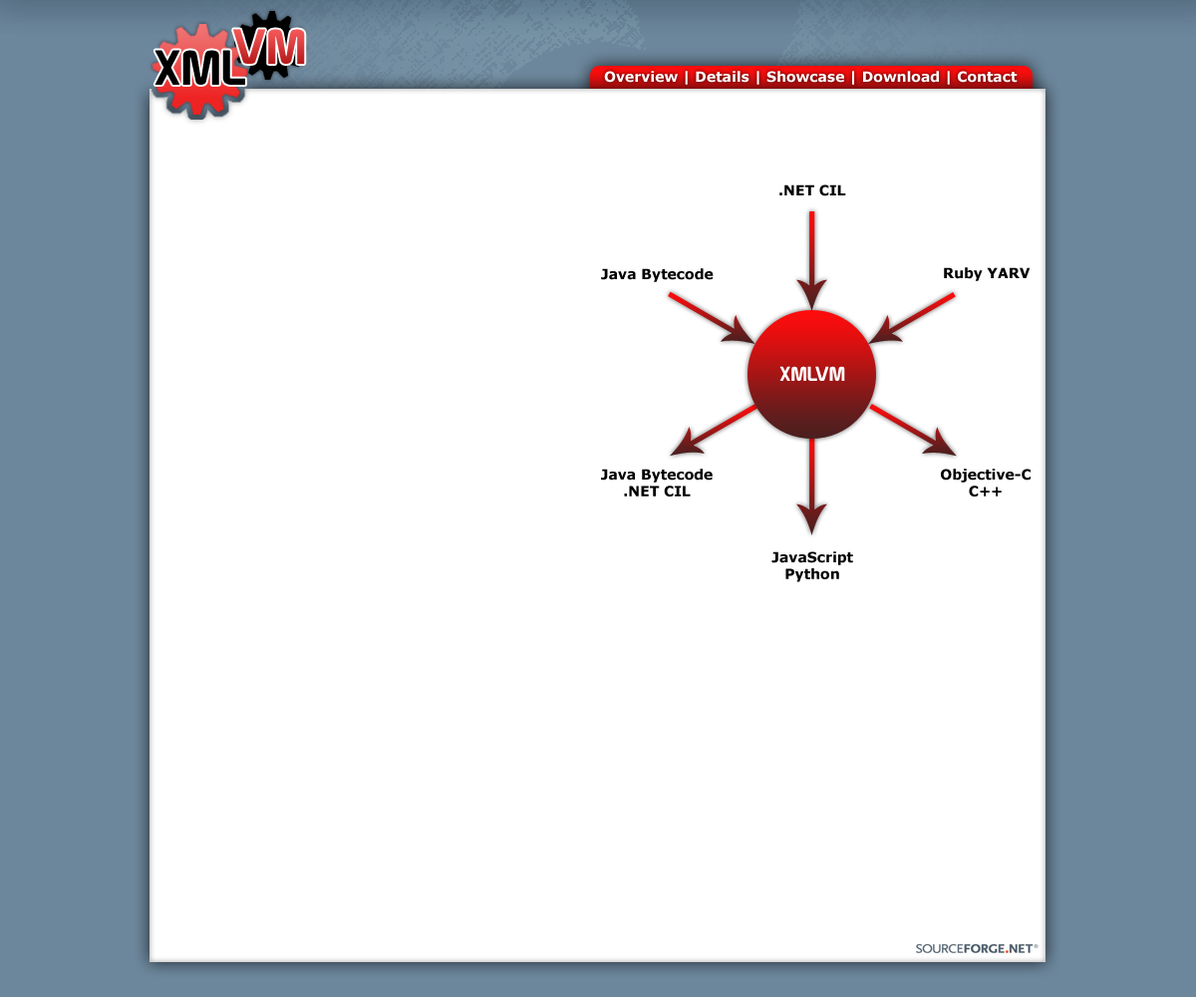
<style>
.page{position:relative;width:1196px;height:997px;background:#ffffff}
.page>*{position:absolute;margin:0}
.t1{font:47.8px "Prototype"}
.t2{font:47.8px "Prototype";color:#000000}
.t3{font:14px "Verdana-Bold";color:#ffffff}
.t4{font:14px "Verdana-Bold";color:#000000}
.t5{font:19.7px "Prototype";color:#ffffff}
</style>
<div class="page">
<p class="t1" style="left:233px;top:29px;width:72px;height:35px">VM</p>
<p class="t1" style="left:233px;top:29px;width:72px;height:35px">VM</p>
<p class="t2" style="left:155px;top:50px;width:90px;height:35px">XML</p>
<p class="t3" style="left:604px;top:71px;width:414px;height:14px">Overview | Details | Showcase | Download | Contact</p>
<p class="t4" style="left:780px;top:184px;width:66px;height:12px">.NET CIL</p>
<p class="t4" style="left:601px;top:268px;width:113px;height:14px">Java Bytecode</p>
<p class="t4" style="left:944px;top:267px;width:87px;height:14px">Ruby YARV</p>
<p class="t5" style="left:780px;top:366px;width:65px;height:15px">XMLVM</p>
<p class="t4" style="left:601px;top:469px;width:112px;height:27px;text-align:center">Java Bytecode<br>.NET CIL</p>
<p class="t4" style="left:941px;top:469px;width:90px;height:27px;text-align:center">Objective-C<br>C++</p>
<p class="t4" style="left:772px;top:551px;width:81px;height:31px;text-align:center">JavaScript<br>Python</p>
</div>
